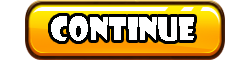
<style>
.page{position:relative;width:250px;height:60px;background:#ffffff}
.page>*{position:absolute;margin:0}
.t1{font:29.7px "ShowcardGothic-Reg";color:#ffffff}
</style>
<div class="page">
<p class="t1" style="left:51px;top:16px;width:143px;height:25px">Continue</p>
</div>
